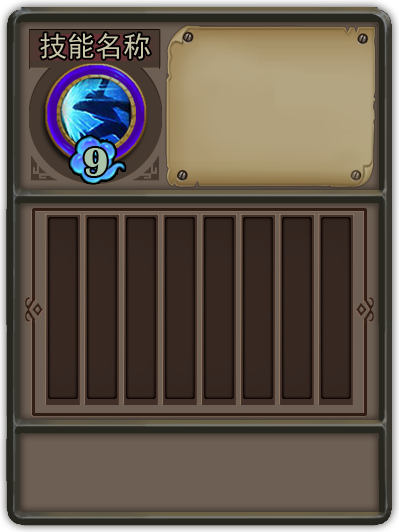
<style>
.page{position:relative;width:399px;height:532px}
.page>*{position:absolute;margin:0}
.t1{font:28px "SimHei";color:#cbc6a9}
</style>
<div class="page">
<p class="t1" style="left:40px;top:33px;width:110px;height:26px">技能名称</p>
</div>
